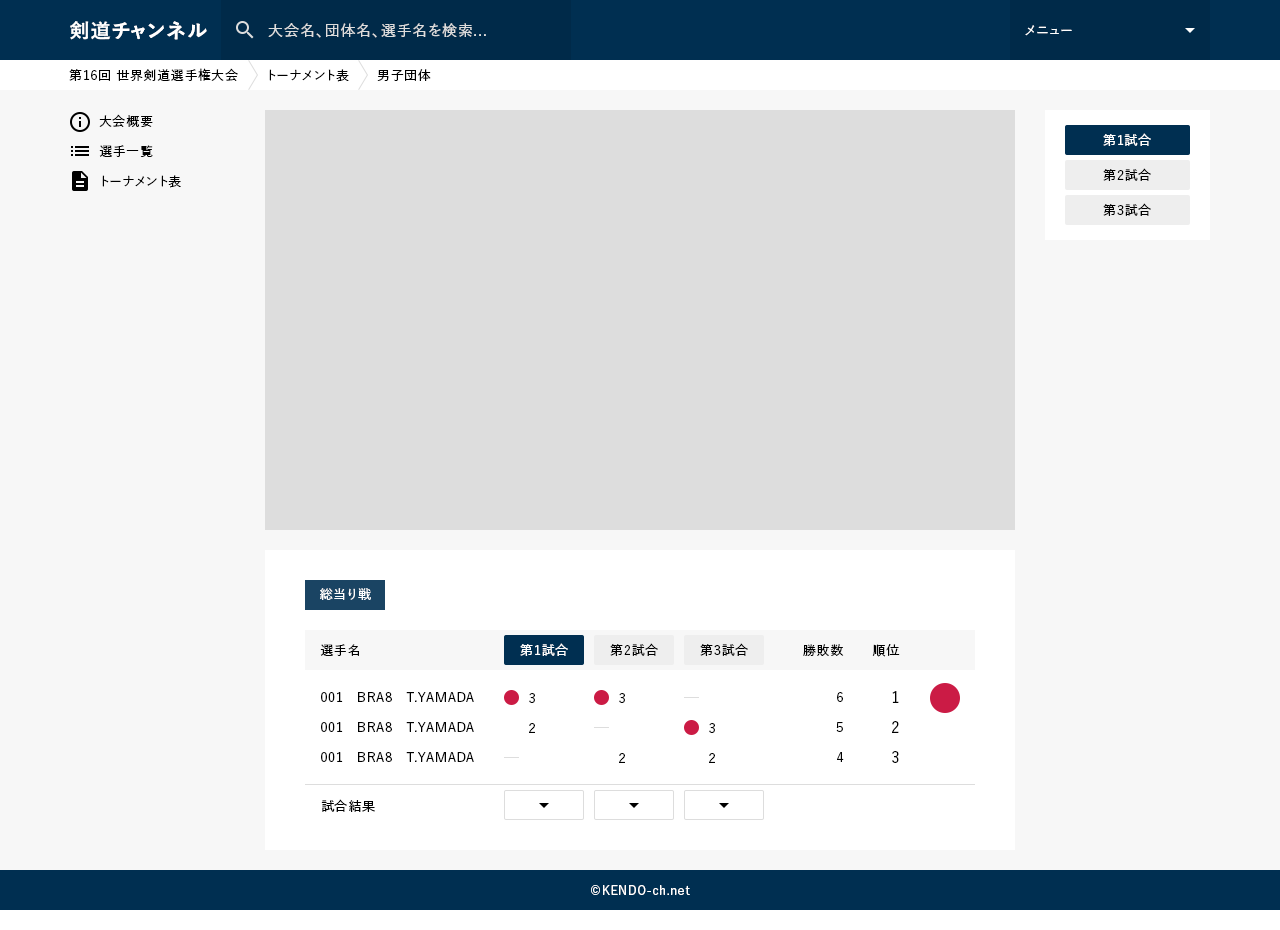
<style>
.page{position:relative;width:1280px;height:930px;background:#f7f7f7}
.page>*{position:absolute;margin:0}
.t1{font:20px "YuGo-Bold";letter-spacing:0.05em;color:#ffffff}
.t2{font:15px "YuGo-Medium";letter-spacing:0.05em;color:#dddddd}
.t3{font:13px "YuGo-Medium";letter-spacing:0.05em;color:#ffffff}
.t4{font:13px "YuGo-Medium";letter-spacing:0.05em;color:#000000}
.t5{font:13px/30px "YuGo-Medium";letter-spacing:0.05em;color:#000000}
.t6{font:13px/35px "YuGo-Medium";letter-spacing:0.05em;color:#000000}
.t7{font:15px "YuGo-Medium";letter-spacing:0.05em;color:#000000}
.t8{font:12px "YuGo-Medium";letter-spacing:0.05em;color:#ffffff}
</style>
<div class="page">
<p class="t1" style="left:70px;top:21px;width:137px;height:19px">剣道チャンネル</p>
<p class="t2" style="left:268px;top:23px;width:218px;height:15px">大会名、団体名、選手名を検索...</p>
<p class="t3" style="left:1025px;top:25px;width:47px;height:11px">メニュー</p>
<p class="t4" style="left:69px;top:68px;width:362px;height:14px">第16回 世界剣道選手権大会　　トーナメント表　　男子団体</p>
<p class="t5" style="left:99px;top:114px;width:82px;height:74px">大会概要<br>選手一覧<br>トーナメント表</p>
<p class="t3" style="left:1103px;top:133px;width:48px;height:13px">第1試合</p>
<p class="t3" style="left:1103px;top:133px;width:48px;height:13px">第1試合</p>
<p class="t6" style="left:1103px;top:168px;width:48px;height:48px;text-align:center">第2試合<br>第3試合</p>
<p class="t3" style="left:320px;top:588px;width:51px;height:12px">総当り戦</p>
<p class="t4" style="left:320px;top:644px;width:39px;height:12px">選手名</p>
<p class="t3" style="left:520px;top:643px;width:48px;height:13px">第1試合</p>
<p class="t3" style="left:520px;top:643px;width:48px;height:13px">第1試合</p>
<p class="t4" style="left:610px;top:643px;width:48px;height:13px">第2試合</p>
<p class="t4" style="left:700px;top:643px;width:48px;height:13px">第3試合</p>
<p class="t4" style="left:803px;top:644px;width:41px;height:12px">勝敗数</p>
<p class="t4" style="left:872px;top:644px;width:28px;height:13px">順位</p>
<p class="t4" style="left:321px;top:692px;width:153px;height:10px">001　BRA8　T.YAMADA</p>
<p class="t4" style="left:529px;top:693px;width:6px;height:10px">3</p>
<p class="t4" style="left:619px;top:693px;width:6px;height:10px">3</p>
<p class="t4" style="left:837px;top:692px;width:6px;height:10px">6</p>
<p class="t7" style="left:892px;top:691px;width:7px;height:12px">1</p>
<p class="t4" style="left:321px;top:722px;width:153px;height:10px">001　BRA8　T.YAMADA</p>
<p class="t4" style="left:529px;top:723px;width:6px;height:10px">2</p>
<p class="t4" style="left:709px;top:723px;width:6px;height:10px">3</p>
<p class="t4" style="left:836px;top:722px;width:7px;height:10px">5</p>
<p class="t7" style="left:892px;top:721px;width:7px;height:12px">2</p>
<p class="t4" style="left:321px;top:752px;width:153px;height:10px">001　BRA8　T.YAMADA</p>
<p class="t4" style="left:619px;top:753px;width:6px;height:10px">2</p>
<p class="t4" style="left:709px;top:753px;width:6px;height:10px">2</p>
<p class="t4" style="left:837px;top:752px;width:7px;height:10px">4</p>
<p class="t7" style="left:892px;top:751px;width:7px;height:12px">3</p>
<p class="t4" style="left:321px;top:799px;width:54px;height:13px">試合結果</p>
<p class="t8" style="left:591px;top:885px;width:99px;height:10px">©KENDO-ch.net</p>
</div>
